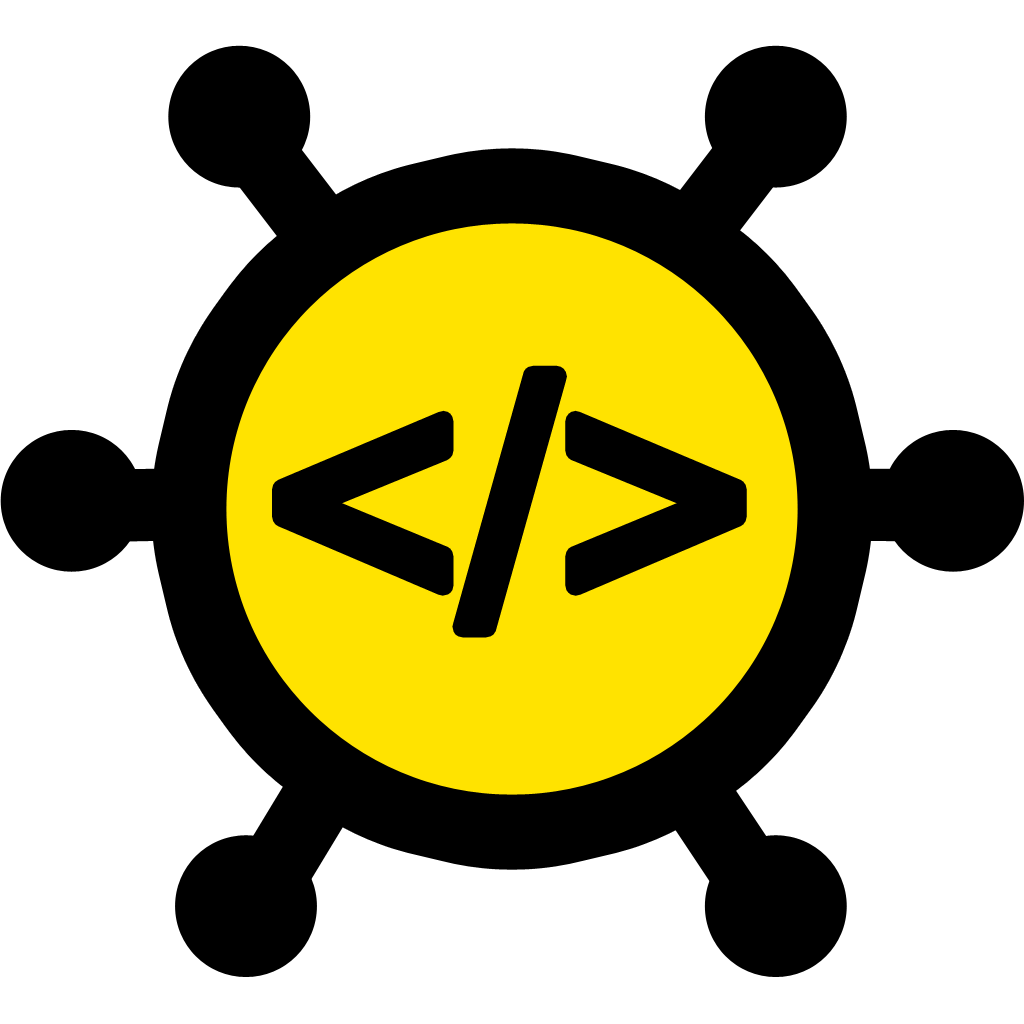
<style>
.page{position:relative;width:1024px;height:1024px;background:#ffffff}
.page>*{position:absolute;margin:0}
.t1{font:340px "ArialMT";color:#000000}
</style>
<div class="page">
<p class="t1" style="left:282px;top:375px;width:455px;height:253px">&lt;/&gt;</p>
</div>
